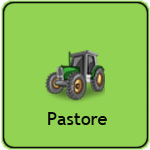
<style>
.page{position:relative;width:150px;height:150px;background:#92d353}
.page>*{position:absolute;margin:0}
.t1{font:18px "TrebuchetMS";color:#0b0b0b}
</style>
<div class="page">
<p class="t1" style="left:48px;top:112px;width:59px;height:13px">Pastore</p>
</div>
